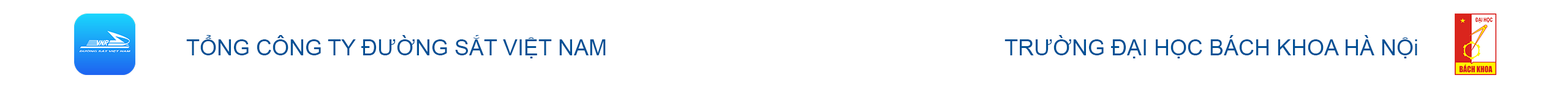
<style>
.page{position:relative;width:1568px;height:91px;background:#ffffff}
.page>*{position:absolute;margin:0}
.t1{font:22px "ArialMT";color:#025095}
</style>
<div class="page">
<p class="t1" style="left:186px;top:35px;width:1231px;height:23px">TỔNG CÔNG TY ĐƯỜNG SẮT VIỆT NAM                                                                 TRƯỜNG ĐẠI HỌC BÁCH KHOA HÀ NỘi              I</p>
</div>
